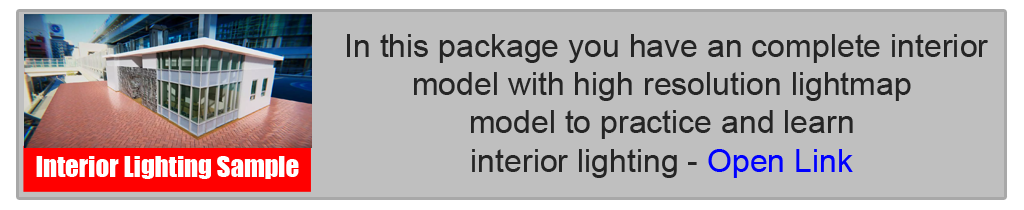
<style>
.page{position:relative;width:1024px;height:210px;background:#bfbfbf}
.page>*{position:absolute;margin:0}
.t1{font:32px "ArialMT";color:#252525}
.t2{font:32px "ArialMT";color:#0000ff}
.t3{font:26.7px "Impact";color:#ffffff}
</style>
<div class="page">
<p class="t1" style="left:347px;top:34px;width:641px;height:144px;text-align:center">In this package you have an complete interior <br>model with high resolution lightmap<br> model to practice and learn <br>interior lighting - <span class="t2">Open Link</span></p>
<p class="t3" style="left:36px;top:156px;width:263px;height:23px">Interior Lighting Sample</p>
</div>
